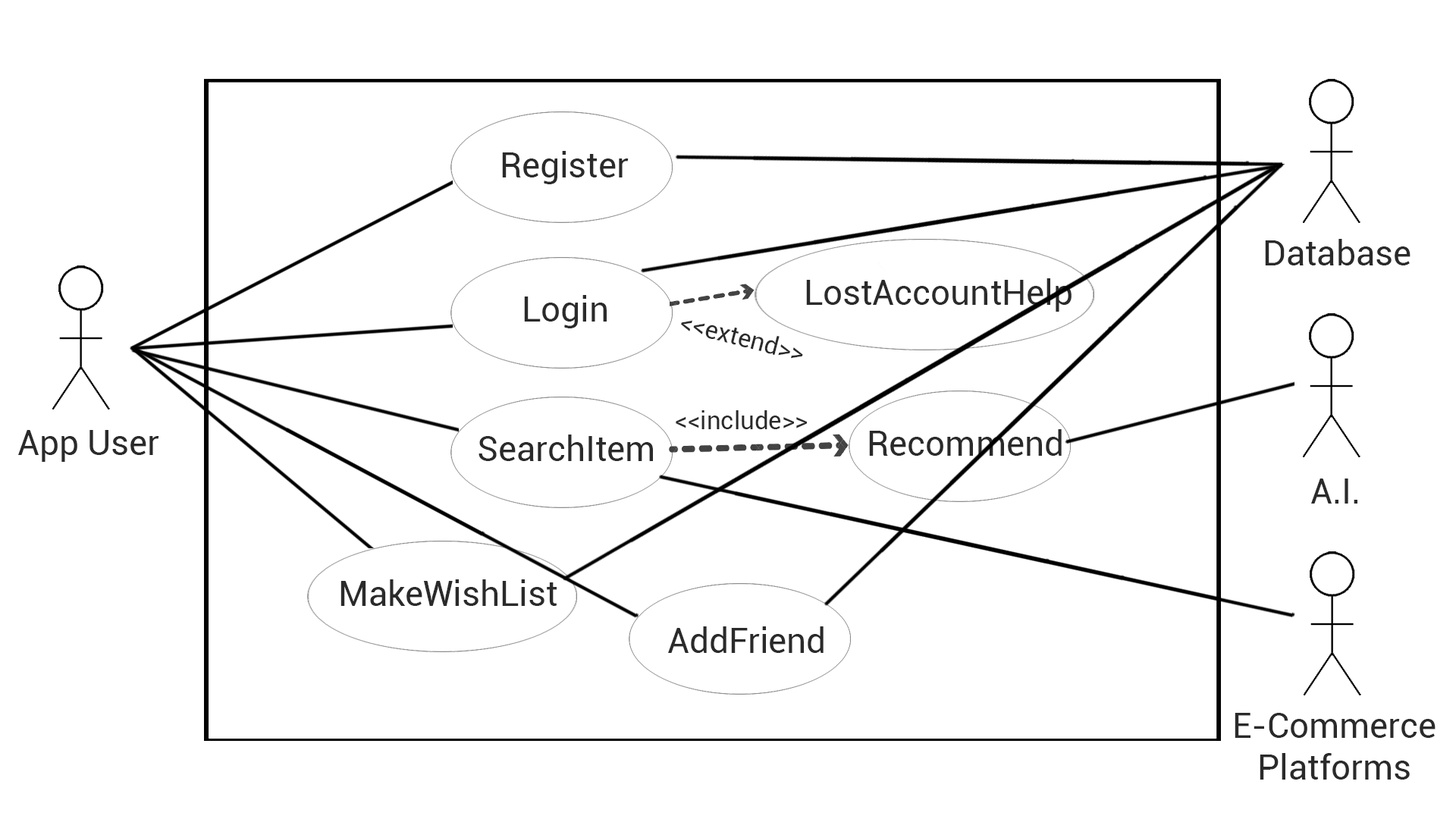
<style>
.page{position:relative;width:1456px;height:819px;background:#ffffff}
.page>*{position:absolute;margin:0}
.t1{font:34.8px "Roboto-Regular";color:#2a2a2a}
.t2{font:25px "Roboto-Regular";color:#2a2a2a}
</style>
<div class="page">
<p class="t1" style="left:502px;top:151px;width:127px;height:33px">Register</p>
<p class="t1" style="left:1265px;top:239px;width:145px;height:26px">Database</p>
<p class="t1" style="left:806px;top:278px;width:266px;height:34px">LostAccountHelp</p>
<p class="t1" style="left:524px;top:295px;width:83px;height:33px">Login</p>
<p class="t2" style="left:681px;top:320px;width:122px;height:39px;rotate:15deg">&lt;&lt;extend&gt;&gt;</p>
<p class="t2" style="left:676px;top:410px;width:131px;height:19px">&lt;&lt;include&gt;&gt;</p>
<p class="t1" style="left:18px;top:430px;width:141px;height:32px">App User</p>
<p class="t1" style="left:479px;top:435px;width:174px;height:26px">SearchItem</p>
<p class="t1" style="left:869px;top:429px;width:193px;height:27px">Recommend</p>
<p class="t1" style="left:1311px;top:479px;width:46px;height:25px">A.I.</p>
<p class="t1" style="left:340px;top:579px;width:217px;height:27px">MakeWishList</p>
<p class="t1" style="left:668px;top:626px;width:156px;height:27px">AddFriend</p>
<p class="t1" style="left:1235px;top:713px;width:201px;height:67px;text-align:center">E-Commerce <br>Platforms</p>
</div>
